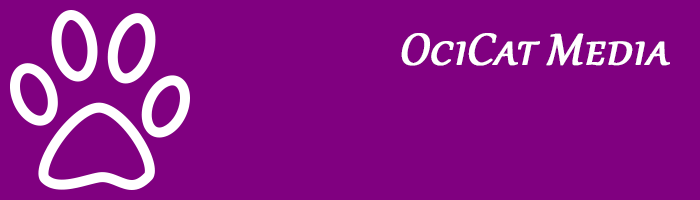
<style>
.page{position:relative;width:700px;height:200px;background:#800080}
.page>*{position:absolute;margin:0}
.t1{font:54px "Gabriola";color:#ffffff;font-variant:small-caps;font-weight:bold;font-style:italic}
</style>
<div class="page">
<p class="t1" style="left:401px;top:33px;width:269px;height:33px">OciCat Media</p>
</div>
